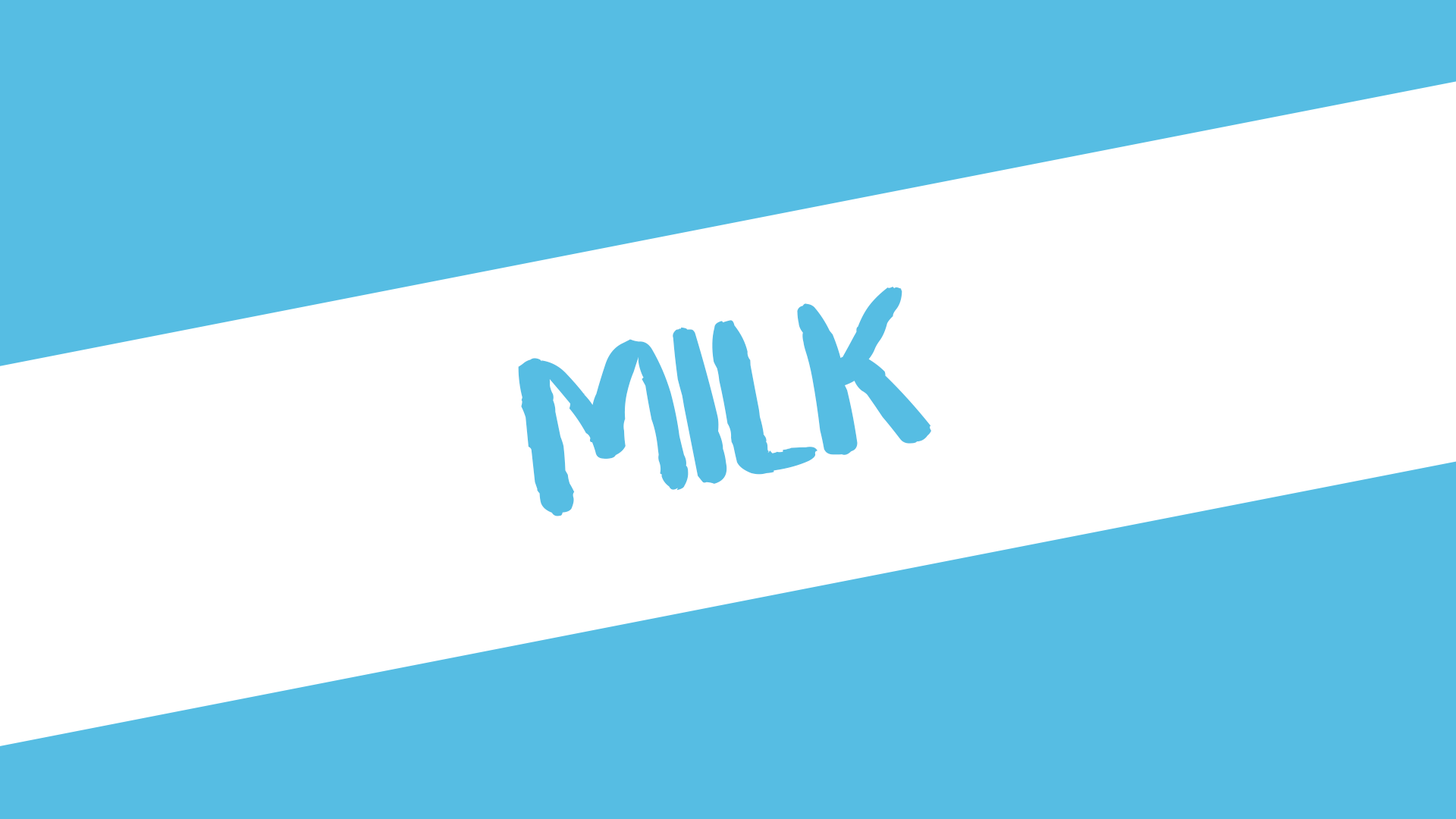
<style>
.page{position:relative;width:1456px;height:819px;background:#56bde3}
.page>*{position:absolute;margin:0}
.t1{font:227.5px "Bread-Rough";color:#56bde3}
</style>
<div class="page">
<p class="t1" style="left:518px;top:287px;width:413px;height:229px;rotate:-11deg">MILK</p>
</div>
